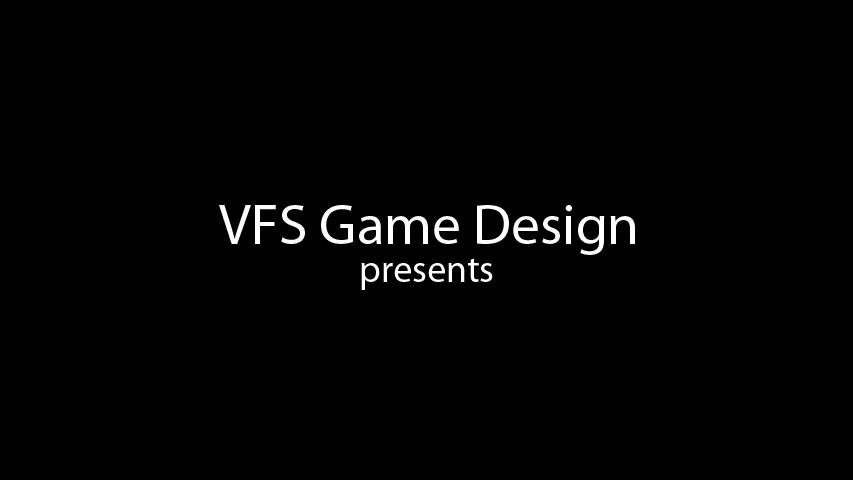
<style>
.page{position:relative;width:853px;height:480px;background:#000000}
.page>*{position:absolute;margin:0}
.t1{font:57.2px "MyriadPro-Regular";color:#ffffff}
.t2{font:38px "MyriadPro-Regular";color:#ffffff}
</style>
<div class="page">
<p class="t1" style="left:219px;top:205px;width:416px;height:50px">VFS Game Design</p>
<p class="t2" style="left:361px;top:258px;width:132px;height:32px">presents</p>
</div>
